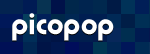
<style>
.page{position:relative;width:150px;height:54px}
.page>*{position:absolute;margin:0}
.t1{font:32px "HammerFat";color:#ffffff}
</style>
<div class="page">
<p class="t1" style="left:12px;top:14px;width:102px;height:28px">picopop</p>
<p class="t1" style="left:12px;top:13px;width:102px;height:28px">picopop</p>
</div>
